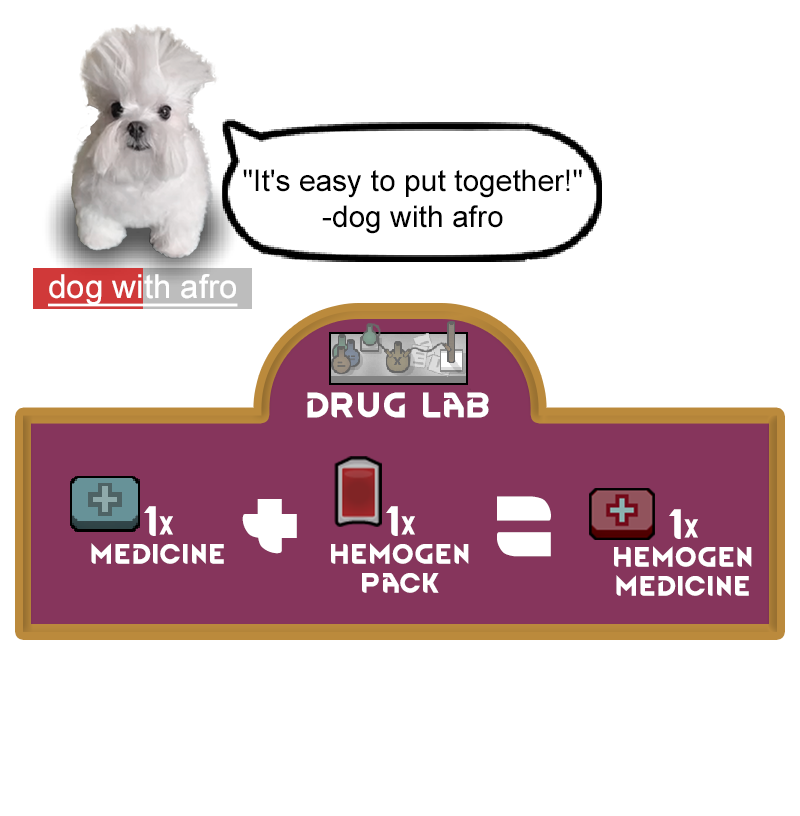
<style>
.page{position:relative;width:800px;height:816px;background:#ffffff}
.page>*{position:absolute;margin:0}
.t1{font:30px "ArialMT";color:#000000}
.t2{font:33px "ArialMT";color:#ffffff;text-decoration:underline}
.t3{font:30px "RimWordFont";color:#ffffff;text-decoration:underline}
.t4{font:130px "RimWordFont";color:#ffffff}
.t5{font:24px "RimWordFont";color:#ffffff}
.t6{font:36px "RimWordFont";color:#ffffff}
.t7{font:22px "RimWordFont";color:#ffffff}
</style>
<div class="page">
<p class="t1" style="left:243px;top:169px;width:339px;height:65px;text-align:center">"It's easy to put together!"<br>-dog with afro</p>
<p class="t2" style="left:48px;top:274px;width:190px;height:33px">dog with afro</p>
<p class="t3" style="left:307px;top:392px;width:182px;height:26px">drug lab</p>
<p class="t4" style="left:497px;top:496px;width:54px;height:61px">=</p>
<p class="t5" style="left:91px;top:506px;width:133px;height:58px;text-align:center"><span class="t6">1</span><span class="t7">x</span><br>medicine</p>
<p class="t4" style="left:242px;top:499px;width:55px;height:55px">+</p>
<p class="t5" style="left:331px;top:506px;width:138px;height:87px;text-align:center"><span class="t6">1</span><span class="t7">x</span><br>hemogen<br>pack</p>
<p class="t5" style="left:614px;top:509px;width:138px;height:87px;text-align:center"><span class="t6">1</span><span class="t7">x<br></span>hemogen<br>medicine</p>
</div>
